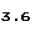
<style>
.page{position:relative;width:32px;height:32px;background:#ffffff}
.page>*{position:absolute;margin:0}
.t1{font:10px "PressStartK";color:#000000}
</style>
<div class="page">
<p class="t1" style="left:1px;top:12px;width:29px;height:9px">3.6</p>
</div>
